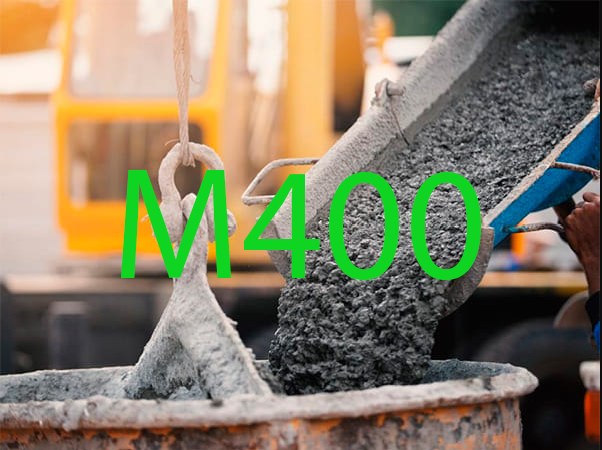
<style>
.page{position:relative;width:602px;height:450px}
.page>*{position:absolute;margin:0}
.t1{font:160px "MyriadPro-Regular";color:#10d422}
</style>
<div class="page">
<p class="t1" style="left:121px;top:169px;width:360px;height:111px">М400</p>
</div>
